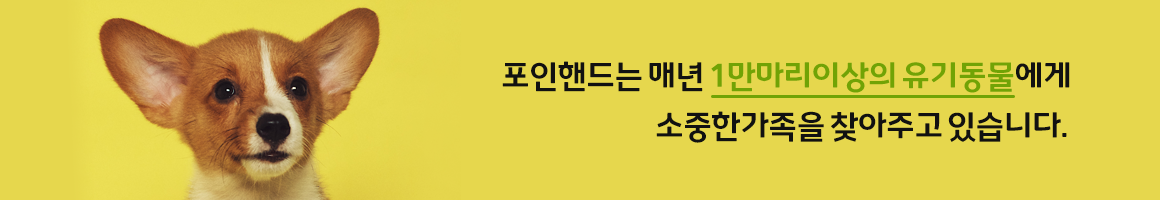
<style>
.page{position:relative;width:1160px;height:200px;background:#e6d74d}
.page>*{position:absolute;margin:0}
.t1{font:32px/50px "ChungbukNationalUniversity-Bold";letter-spacing:-0.02em;color:#111111;text-transform:uppercase}
.t2{font:32px/50px "ChungbukNationalUniversity-Bold";letter-spacing:-0.02em;color:#71a305;text-transform:uppercase}
</style>
<div class="page">
<p class="t1" style="left:502px;top:61px;width:568px;height:82px;text-align:right">포인핸드는 매년 <span class="t2">1만마리이상의 유기동물</span>에게<br>소중한가족을 찾아주고 있습니다.</p>
</div>
